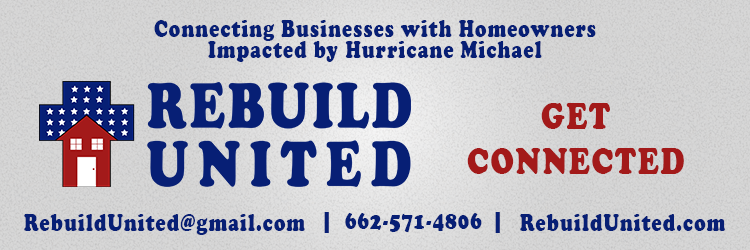
<style>
.page{position:relative;width:750px;height:250px}
.page>*{position:absolute;margin:0}
.t1{font:24.9px "CooperBlack";letter-spacing:0.06em;color:#071f75;scale:0.76 1}
.t2{font:39.3px "CooperBlack";letter-spacing:0.06em;color:#a31a1a;scale:0.76 1}
</style>
<div class="page">
<p class="t1" style="left:154px;top:20px;width:442px;height:21px">Connecting Businesses with Homeowners</p>
<p class="t1" style="left:208px;top:41px;width:334px;height:21px">Impacted by Hurricane Michael</p>
<p class="t2" style="left:541px;top:103px;width:69px;height:26px">GET</p>
<p class="t2" style="left:467px;top:148px;width:217px;height:26px">CONNECTED</p>
<p class="t1" style="left:24px;top:214px;width:281px;height:21px">RebuildUnited@gmail.com</p>
<p class="t1" style="left:324px;top:212px;width:5px;height:21px">|</p>
<p class="t1" style="left:345px;top:213px;width:137px;height:19px">662-571-4806</p>
<p class="t1" style="left:495px;top:212px;width:5px;height:21px">|</p>
<p class="t1" style="left:520px;top:214px;width:205px;height:17px">RebuildUnited.com</p>
</div>
